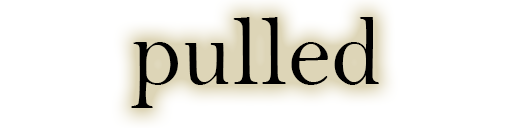
<style>
.page{position:relative;width:512px;height:128px;background:#ffffff}
.page>*{position:absolute;margin:0}
.t1{font:100px "BellMT";color:#000000}
</style>
<div class="page">
<p class="t1" style="left:131px;top:17px;width:248px;height:91px">pulled</p>
</div>
